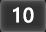
<style>
.page{position:relative;width:46px;height:32px;background:#313131}
.page>*{position:absolute;margin:0}
.t1{font:18.7px "MicrosoftYaHeiUI";color:#fffefe;font-weight:bold}
</style>
<div class="page">
<p class="t1" style="left:13px;top:7px;width:21px;height:16px">10</p>
</div>
